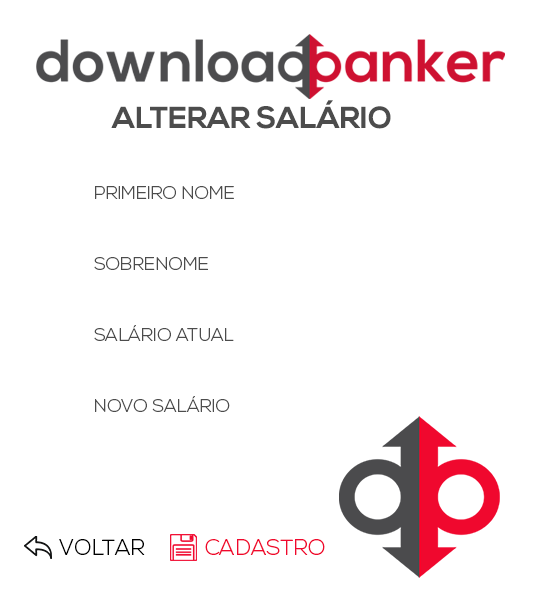
<style>
.page{position:relative;width:535px;height:600px;background:#ffffff}
.page>*{position:absolute;margin:0}
.t1{font:18px "NexaLight";color:#4c4c4c}
.t2{font:22px "NexaLight";color:#000000}
.t3{font:22px "NexaLight";color:#f0082e}
</style>
<div class="page">
<p class="t1" style="left:95px;top:186px;width:139px;height:13px">PRIMEIRO NOME</p>
<p class="t1" style="left:94px;top:257px;width:114px;height:13px">SOBRENOME</p>
<p class="t1" style="left:94px;top:325px;width:140px;height:16px">SALÁRIO ATUAL</p>
<p class="t1" style="left:95px;top:396px;width:135px;height:16px">NOVO SALÁRIO</p>
<p class="t2" style="left:59px;top:539px;width:86px;height:16px">VOLTAR</p>
<p class="t3" style="left:205px;top:539px;width:120px;height:16px">CADASTRO</p>
</div>
